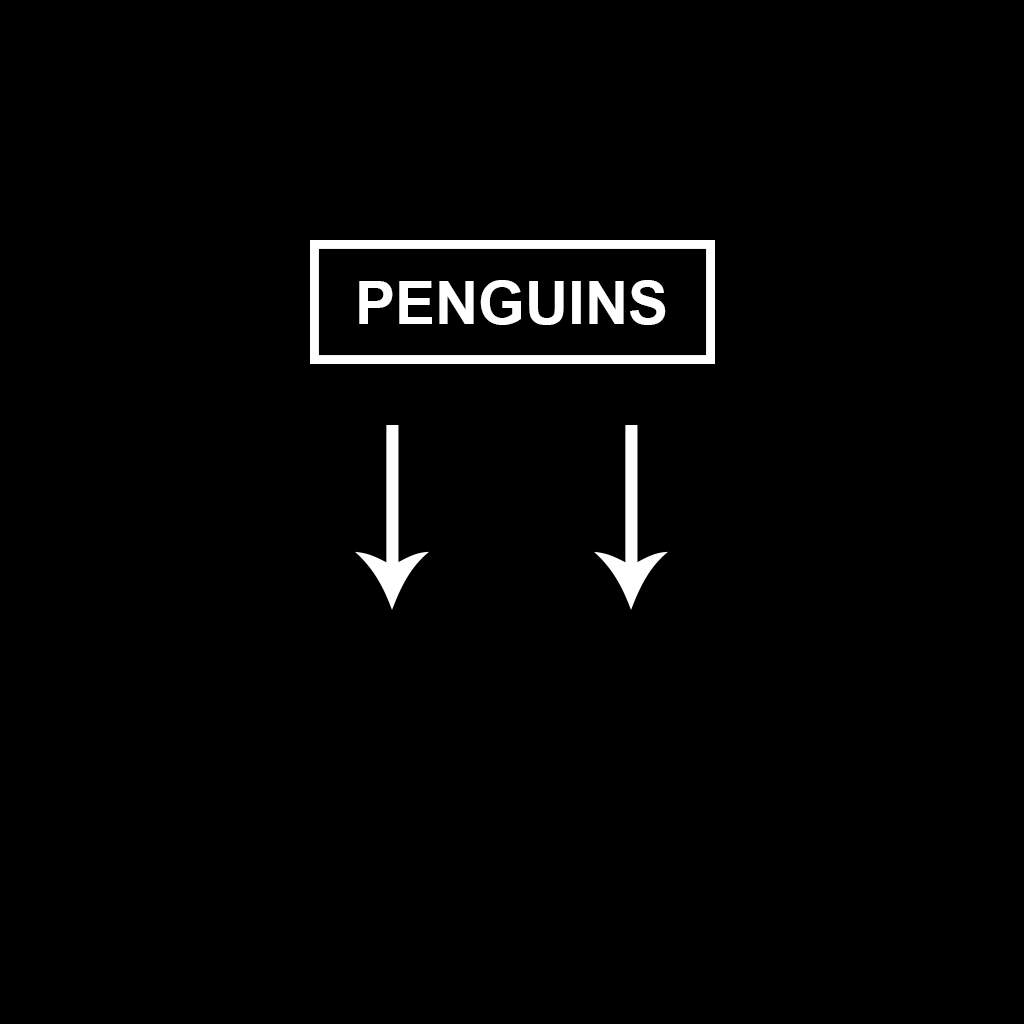
<style>
.page{position:relative;width:1024px;height:1024px;background:#000000}
.page>*{position:absolute;margin:0}
.t1{font:60px "Arial-BoldMT";color:#ffffff}
</style>
<div class="page">
<p class="t1" style="left:359px;top:280px;width:307px;height:45px">PENGUINS</p>
</div>
